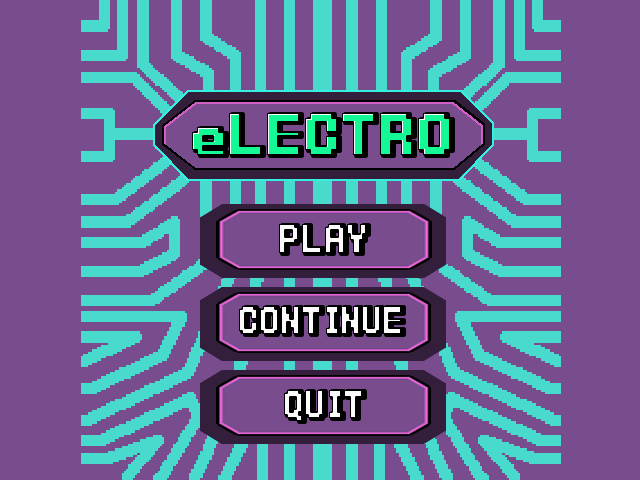
<style>
.page{position:relative;width:640px;height:480px;background:#794c8e}
.page>*{position:absolute;margin:0}
.t1{font:60.9px "Power-Clear-Bold";color:#14f995;scale:1.15 1}
.t2{font:42.2px "Power-Clear-Bold";color:#fbfbfb}
.t3{font:40px "Power-Clear-Bold";color:#fbfbfb}
</style>
<div class="page">
<p class="t1" style="left:192px;top:113px;width:258px;height:42px">eLECTRO</p>
<p class="t2" style="left:279px;top:224px;width:87px;height:29px">PLAY</p>
<p class="t3" style="left:239px;top:306px;width:162px;height:28px">CONTINUE</p>
<p class="t3" style="left:284px;top:390px;width:78px;height:31px">QUIT</p>
</div>
